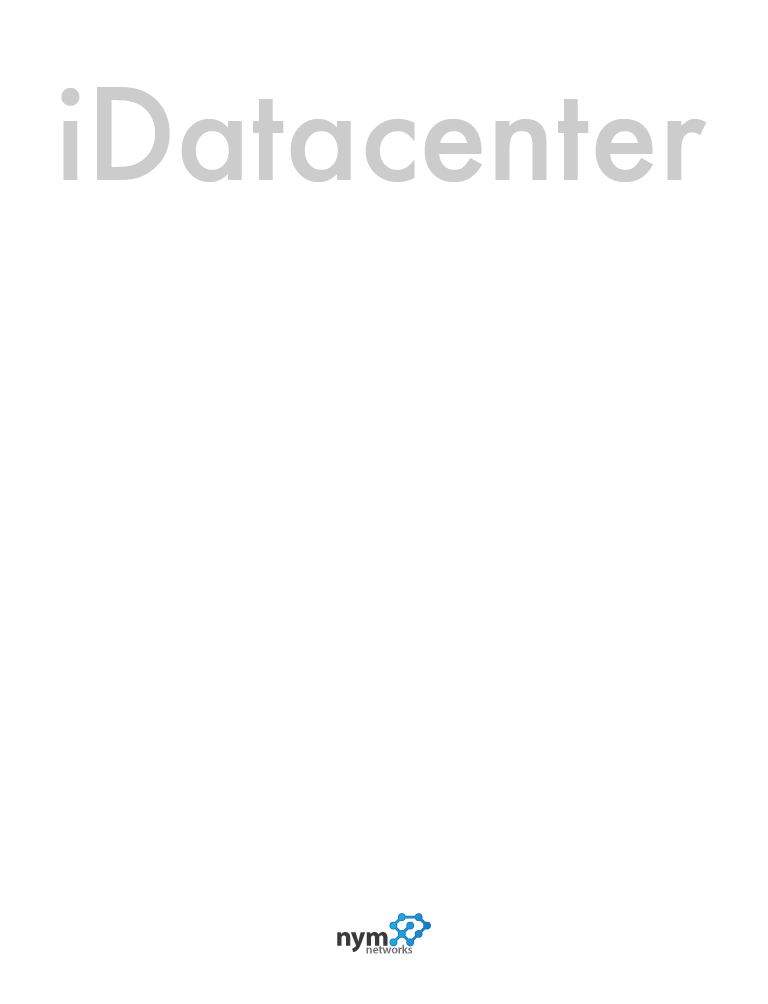
<style>
.page{position:relative;width:768px;height:1004px;background:#ffffff}
.page>*{position:absolute;margin:0}
.t1{font:124px "Futura-Medium";color:#cccccc}
</style>
<div class="page">
<p class="t1" style="left:61px;top:87px;width:646px;height:95px">iDatacenter</p>
</div>
